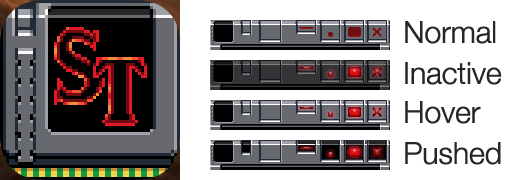
<style>
.page{position:relative;width:510px;height:180px;background:#ffffff}
.page>*{position:absolute;margin:0}
.t1{font:30px "HelveticaNeue-Light";letter-spacing:-0.025em;color:#262626;font-weight:bold}
</style>
<div class="page">
<p class="t1" style="left:405px;top:21px;width:91px;height:23px">Normal</p>
<p class="t1" style="left:405px;top:62px;width:97px;height:23px">Inactive</p>
<p class="t1" style="left:405px;top:101px;width:76px;height:23px">Hover</p>
<p class="t1" style="left:405px;top:142px;width:96px;height:23px">Pushed</p>
</div>
